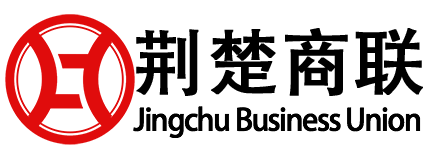
<style>
.page{position:relative;width:425px;height:160px;background:#ffffff}
.page>*{position:absolute;margin:0}
.t1{font:72px "AdobeHeitiStd-Regular";letter-spacing:-0.01em;color:#000000;font-weight:bold}
.t2{font:30px "AdobeHeitiStd-Regular";letter-spacing:-0.05em;color:#000000}
</style>
<div class="page">
<p class="t1" style="left:136px;top:28px;width:287px;height:68px">荆楚商联</p>
<p class="t2" style="left:133px;top:106px;width:288px;height:32px">Jingchu Business Union</p>
</div>
